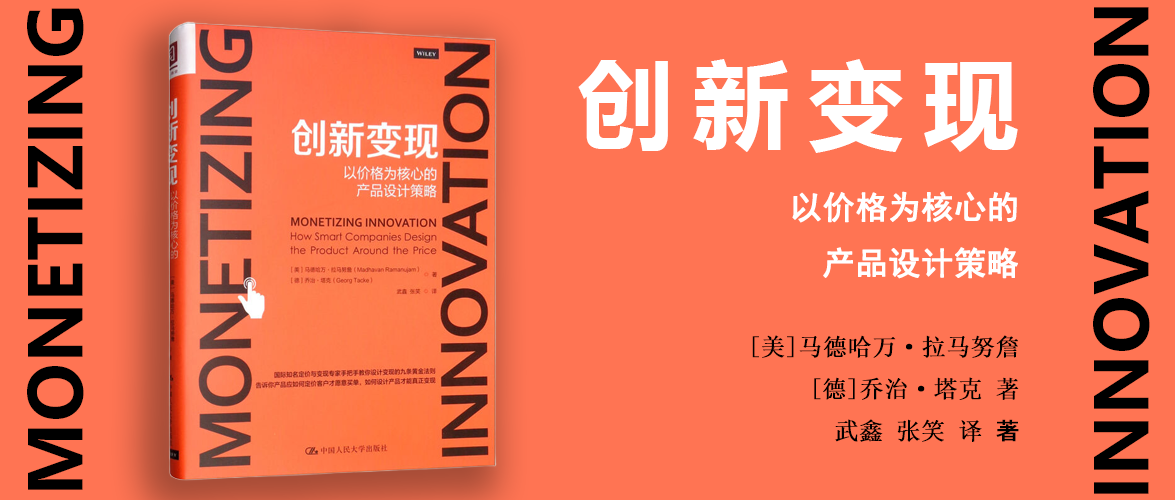
<style>
.page{position:relative;width:1175px;height:500px;background:#ff7453}
.page>*{position:absolute;margin:0}
.t1{font:72px "MicrosoftYaHei-Bold";color:#000000}
.t2{font:96px "MicrosoftYaHei-Bold";letter-spacing:0.2em;color:#ffffff}
.t3{font:32px "SimHei";color:#ffffff;font-weight:bold}
.t4{font:24px "SimSun";color:#000000;font-weight:bold}
.t5{font:24px "MS-Gothic";color:#000000;font-weight:bold}
</style>
<div class="page">
<p class="t1" style="left:27px;top:8px;width:57px;height:482px;rotate:-90deg">MONETIZING</p>
<p class="t1" style="left:1093px;top:7px;width:57px;height:487px;rotate:-90deg">INNOVATION</p>
<p class="t2" style="left:578px;top:59px;width:440px;height:94px">创新变现</p>
<p class="t3" style="left:792px;top:191px;width:226px;height:88px;text-align:right">以价格为核心的<br>产品设计策略</p>
<p class="t4" style="left:752px;top:335px;width:267px;height:107px;text-align:right">[美]马德哈万·拉马努詹<br>[德]乔治·塔克 著<br>武鑫 张笑 译<span class="t5"> 著</span></p>
</div>
